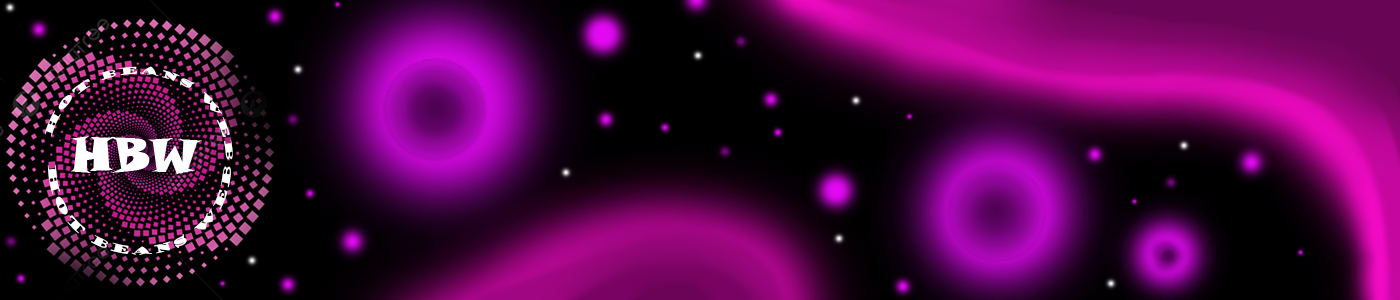
<style>
.page{position:relative;width:1400px;height:300px;background:#000000}
.page>*{position:absolute;margin:0}
.t1{font:10px "GoudyStout";color:#ffffff}
.t2{font:24px "GoudyStout";color:#ffffff}
.t3{font:11px "GoudyStout";color:#ffffff}
</style>
<div class="page">
<p class="t1" style="left:44px;top:66px;width:189px;height:94px"><span class="t2"> </span>hot beans web</p>
<p class="t3" style="left:47px;top:165px;width:184px;height:90px">hot beans web</p>
</div>
